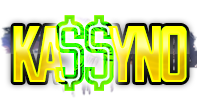
<style>
.page{position:relative;width:199px;height:106px;background:#ffffff}
.page>*{position:absolute;margin:0}
.t1{font:90px "ReckonerBold"}
.t2{font:80px "ReckonerBold"}
</style>
<div class="page">
<p class="t1" style="left:55px;top:15px;width:59px;height:76px">$$</p>
<p class="t2" style="left:13px;top:26px;width:174px;height:56px">KA   YNO</p>
</div>
